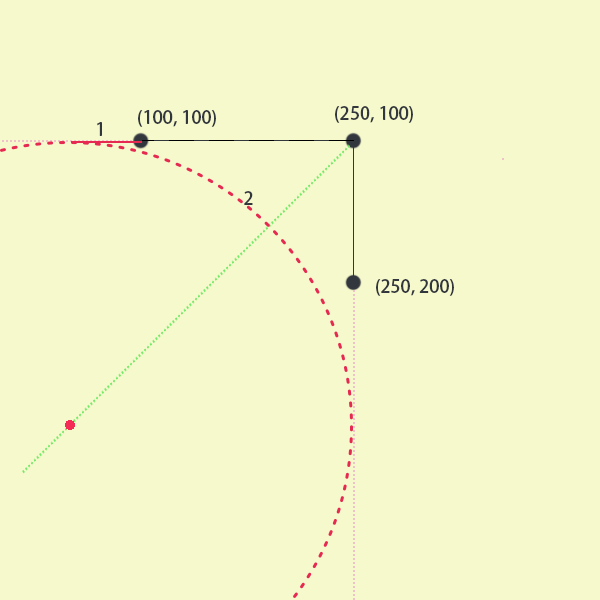
<style>
.page{position:relative;width:600px;height:600px;background:#f6f9cb}
.page>*{position:absolute;margin:0}
.t1{font:18px "AdobeHeitiStd-Regular";color:#32363d}
</style>
<div class="page">
<p class="t1" style="left:138px;top:110px;width:78px;height:17px">(100, 100)</p>
<p class="t1" style="left:335px;top:106px;width:78px;height:17px">(250, 100)</p>
<p class="t1" style="left:97px;top:122px;width:5px;height:14px">1</p>
<p class="t1" style="left:244px;top:191px;width:9px;height:14px">2</p>
<p class="t1" style="left:376px;top:279px;width:78px;height:17px">(250, 200)</p>
</div>
